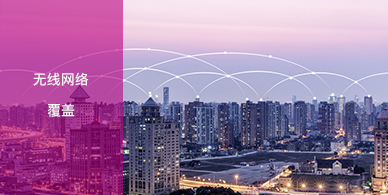
<style>
.page{position:relative;width:388px;height:195px}
.page>*{position:absolute;margin:0}
.t1{font:14px "PingFangSC-Medium";color:#f5f5f5}
</style>
<div class="page">
<p class="t1" style="left:33px;top:72px;width:56px;height:14px">无线网络</p>
<p class="t1" style="left:47px;top:103px;width:28px;height:14px">覆盖</p>
</div>
